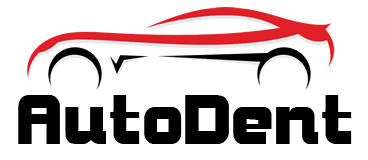
<style>
.page{position:relative;width:368px;height:160px;background:#ffffff}
.page>*{position:absolute;margin:0}
.t1{font:74.9px "BolsterBold";letter-spacing:0.005em;color:#000000;scale:0.9 1}
</style>
<div class="page">
<p class="t1" style="left:18px;top:95px;width:334px;height:49px">AutoDent</p>
</div>
